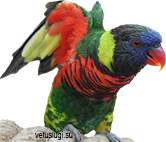
<style>
.page{position:relative;width:166px;height:142px;background:#ffffff}
.page>*{position:absolute;margin:0}
.t1{font:8.7px "ArialNarrow";letter-spacing:0.002em;color:#090909}
</style>
<div class="page">
<p class="t1" style="left:35px;top:131px;width:38px;height:9px">vetuslugi.su</p>
</div>
